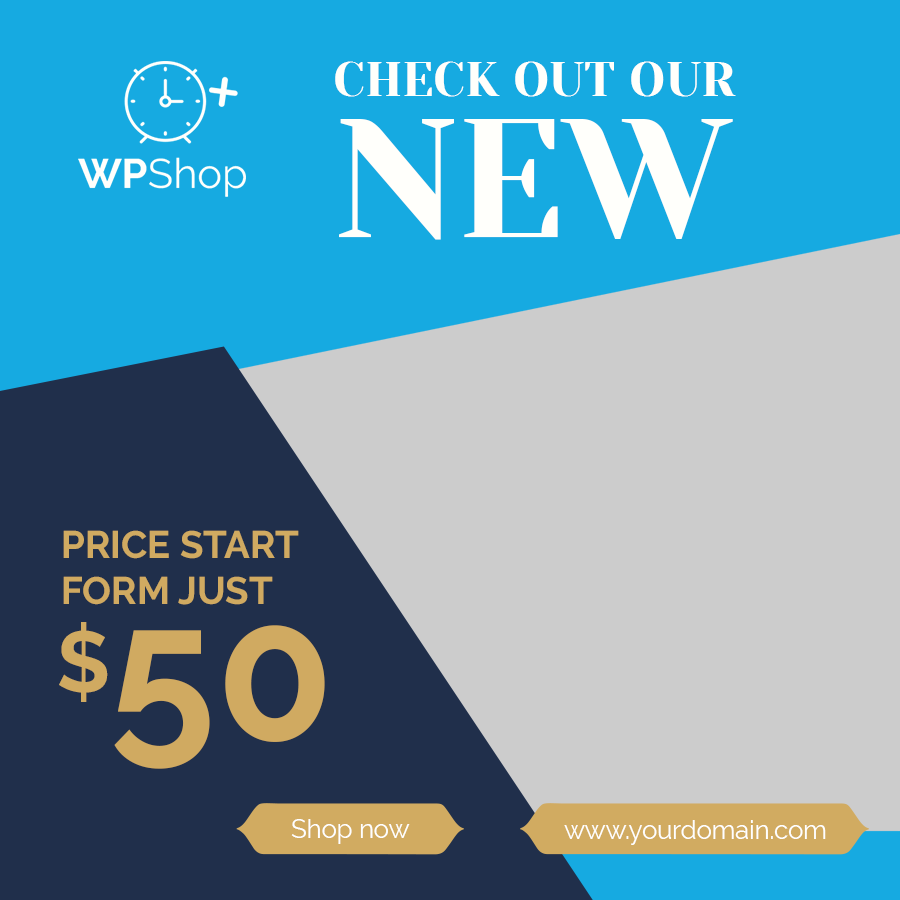
<style>
.page{position:relative;width:900px;height:900px;background:#16aae1}
.page>*{position:absolute;margin:0}
.t1{font:49.2px "YesevaOne-Regular";color:#fffffb}
.t2{font:167.8px "YesevaOne-Regular";color:#fffffb}
.t3{font:38.3px "Raleway-Bold";color:#d0aa61}
.t4{font:86px "Raleway-Bold";color:#d0aa61}
.t5{font:192.1px "Raleway-Bold";color:#d0aa61}
.t6{font:25.5px "Raleway-Regular";color:#ffffff}
</style>
<div class="page">
<p class="t1" style="left:335px;top:61px;width:401px;height:36px">CHECK OUT OUR</p>
<p class="t2" style="left:339px;top:119px;width:394px;height:121px">NEW</p>
<p class="t3" style="left:63px;top:530px;width:236px;height:75px">PRICE START<br>FORM JUST</p>
<p class="t4" style="left:59px;top:622px;width:49px;height:80px">$</p>
<p class="t5" style="left:114px;top:625px;width:211px;height:144px">50</p>
<p class="t6" style="left:291px;top:819px;width:119px;height:25px">Shop now</p>
<p class="t6" style="left:564px;top:820px;width:262px;height:25px">www.yourdomain.com</p>
</div>
